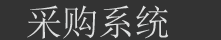
<style>
.page{position:relative;width:221px;height:40px;background:#333333}
.page>*{position:absolute;margin:0}
.t1{font:36px "SimSun";color:#dddede}
</style>
<div class="page">
<p class="t1" style="left:27px;top:5px;width:142px;height:34px">采购系统</p>
</div>
